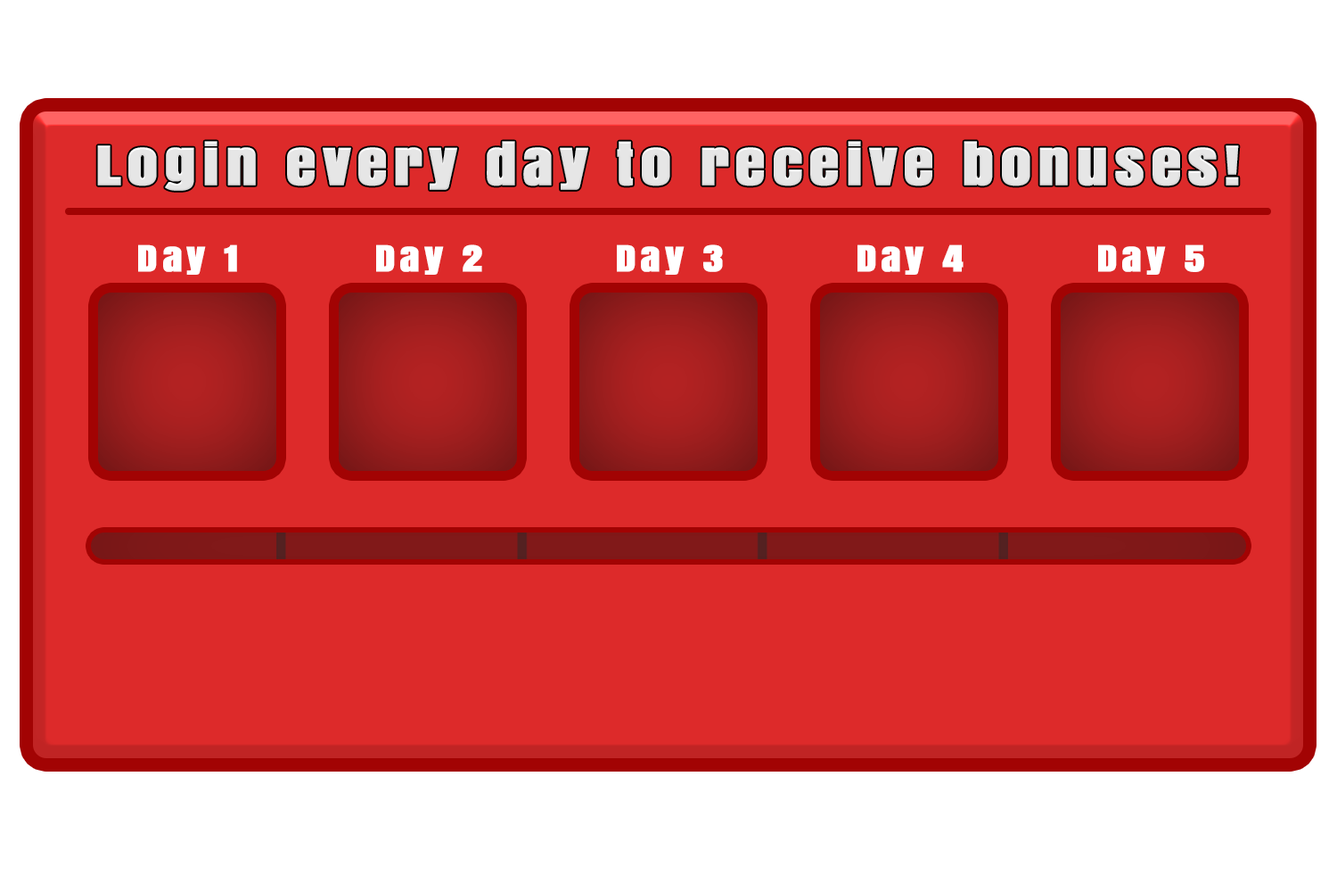
<style>
.page{position:relative;width:1337px;height:892px;background:#dd2a2a}
.page>*{position:absolute;margin:0}
.t1{font:50.2px "Anton";letter-spacing:0.1em;color:#e6e6e6;font-weight:bold;scale:1.2 1}
.t2{font:33.4px "Anton";letter-spacing:0.1em;color:#ffffff;font-weight:bold;scale:1.2 1}
</style>
<div class="page">
<p class="t1" style="left:97px;top:141px;width:1142px;height:50px">Login every day to receive bonuses!</p>
<p class="t2" style="left:138px;top:244px;width:99px;height:31px">Day 1</p>
<p class="t2" style="left:376px;top:244px;width:106px;height:31px">Day 2</p>
<p class="t2" style="left:617px;top:244px;width:106px;height:31px">Day 3</p>
<p class="t2" style="left:858px;top:244px;width:106px;height:31px">Day 4</p>
<p class="t2" style="left:1098px;top:244px;width:107px;height:31px">Day 5</p>
</div>
